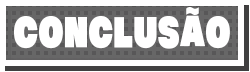
<style>
.page{position:relative;width:250px;height:72px;background:#ffffff}
.page>*{position:absolute;margin:0}
.t1{font:36px "RaglanPunchStd-UB";letter-spacing:0.016em;color:#ffffff;scale:0.78 1}
</style>
<div class="page">
<p class="t1" style="left:14px;top:7px;width:216px;height:42px">CONCLUSÃO</p>
</div>
